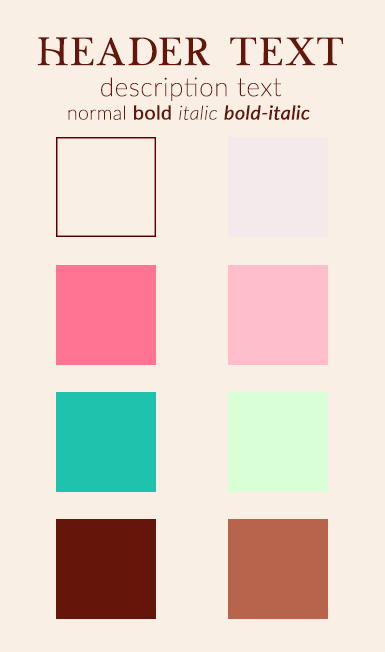
<style>
.page{position:relative;width:385px;height:652px;background:#faefe5}
.page>*{position:absolute;margin:0}
.t1{font:25.9px "Lato-Thin";color:#65160a;font-weight:bold}
.t2{font:45.3px "LucyRosePERSONAL-Regular";color:#65160a;font-weight:bold}
.t3{font:19.4px "Lato-Thin";color:#65160a;font-weight:bold}
.t4{font:19.4px "Lato-Regular";color:#65160a;font-weight:bold}
.t5{font:19.4px "Lato-ThinItalic";color:#65160a;font-weight:bold}
.t6{font:19.4px "Lato-Italic";color:#65160a;font-weight:bold}
</style>
<div class="page">
<p class="t1" style="left:37px;top:37px;width:307px;height:83px;text-align:center"><span class="t2">Header text<br></span>description text<br><span class="t3">normal </span><span class="t4">bold </span><span class="t5">italic </span><span class="t6">bold-italic</span></p>
</div>
